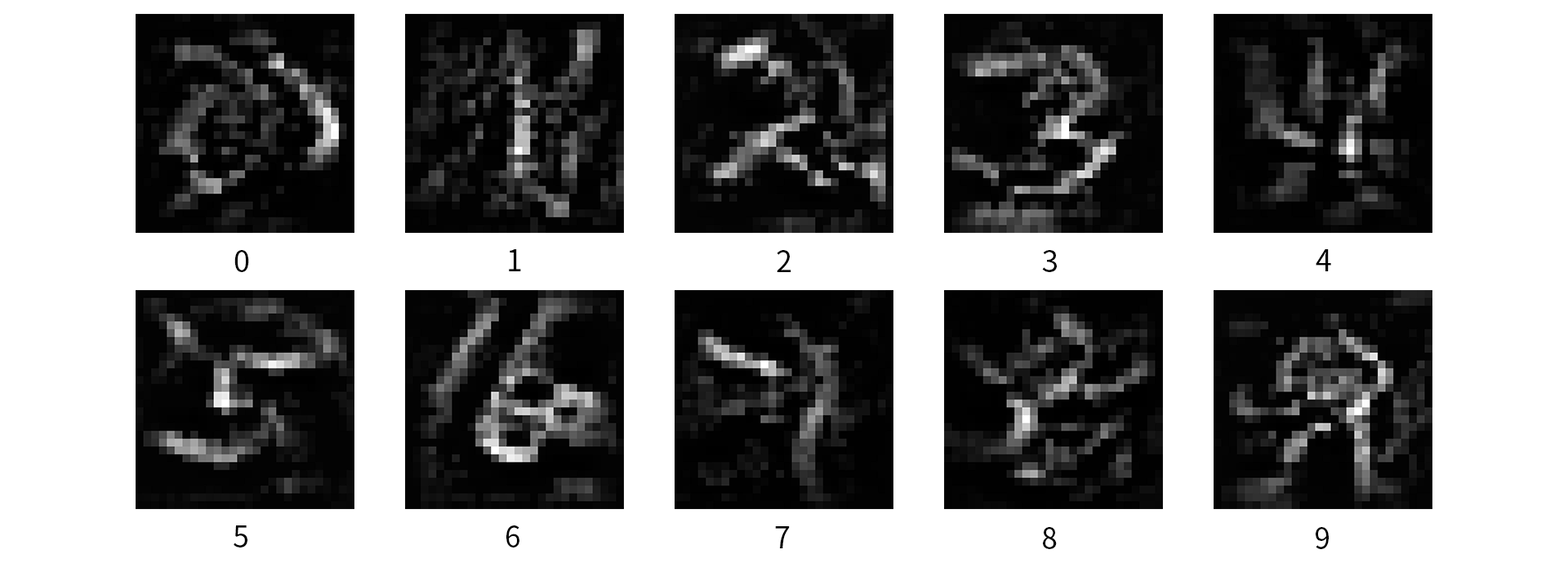
<style>
.page{position:relative;width:1568px;height:572px;background:#ffffff}
.page>*{position:absolute;margin:0}
.t1{font:29.4px "SourceHanSansCN-Regular";color:#000000}
</style>
<div class="page">
<p class="t1" style="left:234px;top:250px;width:15px;height:22px">0</p>
<p class="t1" style="left:509px;top:249px;width:12px;height:22px">1</p>
<p class="t1" style="left:777px;top:250px;width:14px;height:22px">2</p>
<p class="t1" style="left:1042px;top:250px;width:15px;height:22px">3</p>
<p class="t1" style="left:1316px;top:249px;width:15px;height:22px">4</p>
<p class="t1" style="left:234px;top:525px;width:13px;height:22px">5</p>
<p class="t1" style="left:506px;top:525px;width:13px;height:22px">6</p>
<p class="t1" style="left:775px;top:526px;width:15px;height:22px">7</p>
<p class="t1" style="left:1043px;top:527px;width:14px;height:22px">8</p>
<p class="t1" style="left:1316px;top:527px;width:13px;height:22px">9</p>
</div>
